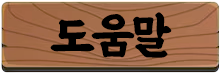
<style>
.page{position:relative;width:220px;height:73px}
.page>*{position:absolute;margin:0}
.t1{font:50px "BMEULJIRO";letter-spacing:-0.08em;color:#000000}
</style>
<div class="page">
<p class="t1" style="left:50px;top:12px;width:122px;height:46px">도움말</p>
</div>
